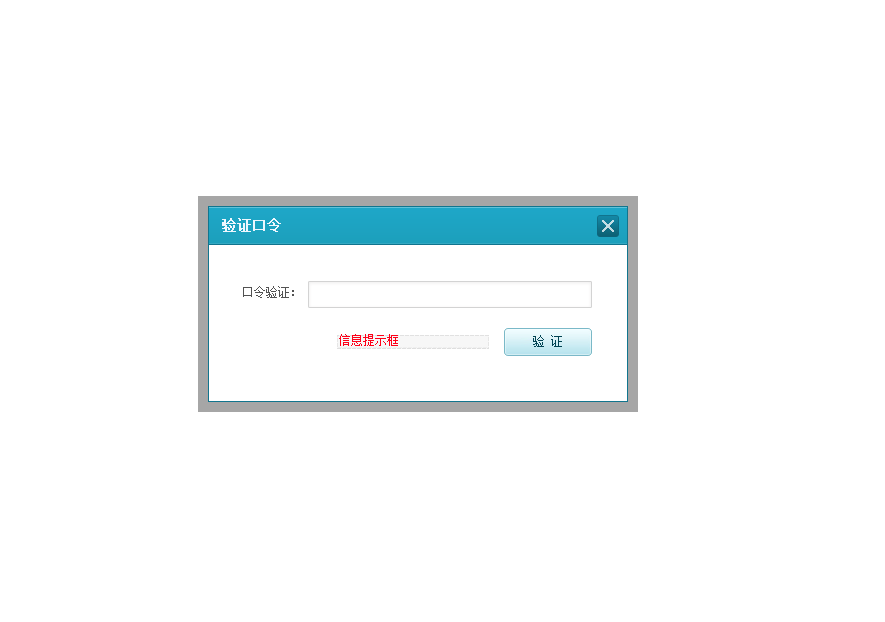
<style>
.page{position:relative;width:885px;height:622px;background:#ffffff}
.page>*{position:absolute;margin:0}
.t1{font:14px "SimSun";color:#eef7fe;font-weight:bold}
.t2{font:12px "SimSun";color:#525252}
</style>
<div class="page">
<p class="t1" style="left:222px;top:218px;width:59px;height:14px">验证口令</p>
<p class="t2" style="left:243px;top:286px;width:51px;height:12px">口令验证：</p>
</div>
